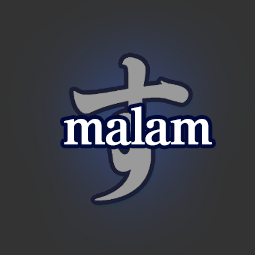
<style>
.page{position:relative;width:255px;height:255px}
.page>*{position:absolute;margin:0}
.t1{font:50px "RyuminPro-ExBold";letter-spacing:-0.08em;color:#ffffff;font-weight:bold}
</style>
<div class="page">
<p class="t1" style="left:64px;top:106px;width:148px;height:40px">malam</p>
</div>
